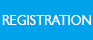
<style>
.page{position:relative;width:93px;height:40px;background:#00a2e9}
.page>*{position:absolute;margin:0}
.t1{font:13.9px "Humanist521BT-Roman";color:#ffffff;scale:0.97 1}
</style>
<div class="page">
<p class="t1" style="left:2px;top:15px;width:89px;height:10px">REGISTRATION</p>
</div>
